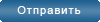
<style>
.page{position:relative;width:100px;height:22px}
.page>*{position:absolute;margin:0}
.t1{font:11px "ArialMT";letter-spacing:0.099em;color:#ffffff}
</style>
<div class="page">
<p class="t1" style="left:17px;top:6px;width:64px;height:10px">Отправить</p>
</div>
